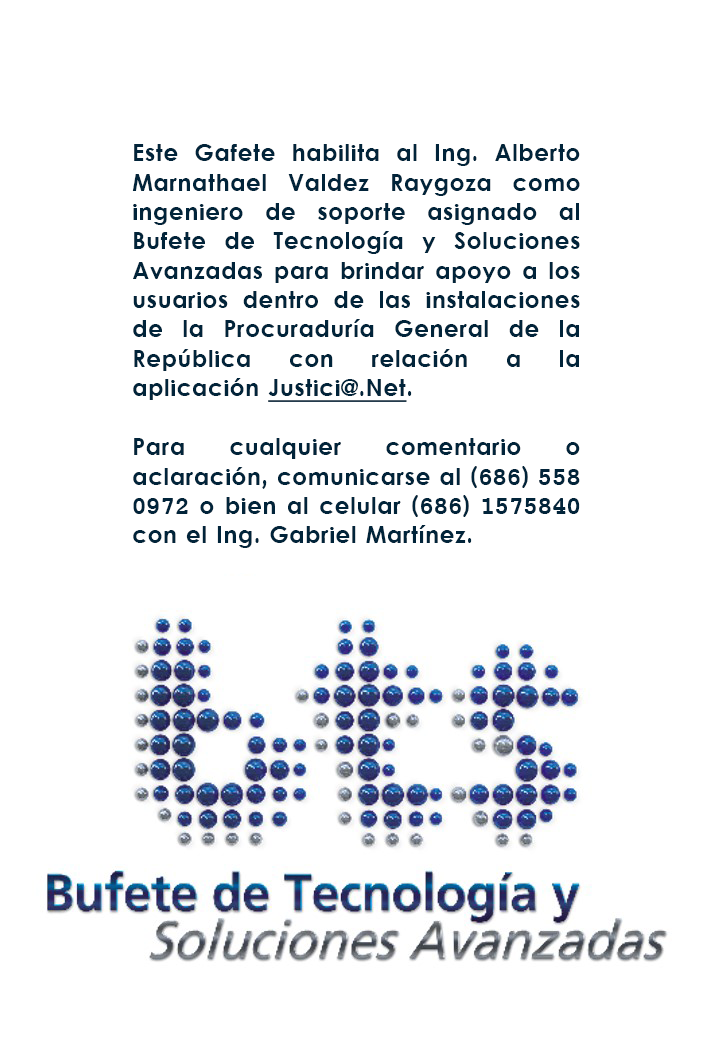
<style>
.page{position:relative;width:720px;height:1040px;background:#ffffff}
.page>*{position:absolute;margin:0}
.t1{font:22.7px/29.3px "LevenimMT-Bold";letter-spacing:0.04em;color:#01243a}
.t2{font:22.7px/29.3px "LevenimMT-Bold";letter-spacing:0.04em;color:#01243a;text-decoration:underline}
</style>
<div class="page">
<p class="t1" style="left:132px;top:144px;width:448px;height:404px;text-align:justify">Este Gafete habilita al Ing. Alberto Marnathael Valdez Raygoza como  ingeniero de soporte asignado al Bufete de Tecnología y Soluciones Avanzadas para brindar apoyo a los usuarios dentro de las instalaciones de la Procuraduría General de la República con relación a la          aplicación <span class="t2">Justici@.Net</span>.<br><br>Para cualquier comentario o aclaración, comunicarse al (686) 558 0972 o bien al celular (686) 1575840 con el Ing. Gabriel Martínez.</p>
</div>
